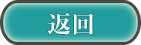
<style>
.page{position:relative;width:141px;height:45px}
.page>*{position:absolute;margin:0}
.t1{font:24px "RyuminPr6N-ExBold";color:#f2f6f6}
</style>
<div class="page">
<p class="t1" style="left:47px;top:13px;width:46px;height:22px">返回</p>
</div>
